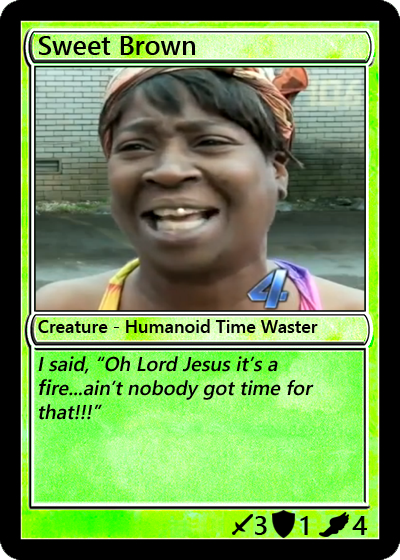
<style>
.page{position:relative;width:400px;height:560px}
.page>*{position:absolute;margin:0}
.t1{font:27px "YuGothicUI-Semibold";color:#000000}
.t2{font:18px "YuGothicUI-Semibold";color:#000000}
.t3{font:20px "YuGothicUI-Semibold";color:#000000;font-style:italic}
</style>
<div class="page">
<p class="t1" style="left:39px;top:36px;width:156px;height:19px">Sweet Brown</p>
<p class="t2" style="left:38px;top:319px;width:280px;height:14px">Creature - Humanoid Time Waster</p>
<p class="t3" style="left:38px;top:356px;width:276px;height:64px">I said, “Oh Lord Jesus it’s a fire...ain’t nobody got time for that!!!”</p>
<p class="t1" style="left:255px;top:516px;width:12px;height:19px">3</p>
<p class="t1" style="left:300px;top:516px;width:8px;height:19px">1</p>
<p class="t1" style="left:352px;top:516px;width:15px;height:19px">4</p>
</div>
